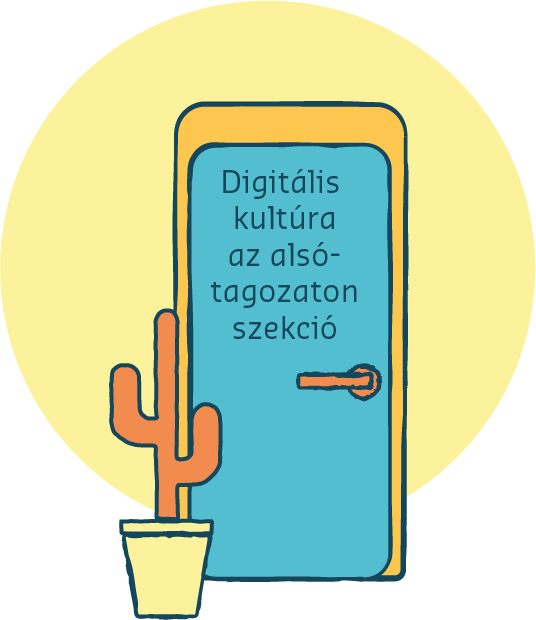
<style>
.page{position:relative;width:536px;height:620px;background:#fcf29c}
.page>*{position:absolute;margin:0}
.t1{font:30.4px "SansaPro-Normal";color:#14475c}
</style>
<div class="page">
<p class="t1" style="left:211px;top:169px;width:146px;height:170px;text-align:center">Digitális <br>kultúra<br>az alsó-<br>tagozaton<br>szekció</p>
</div>
